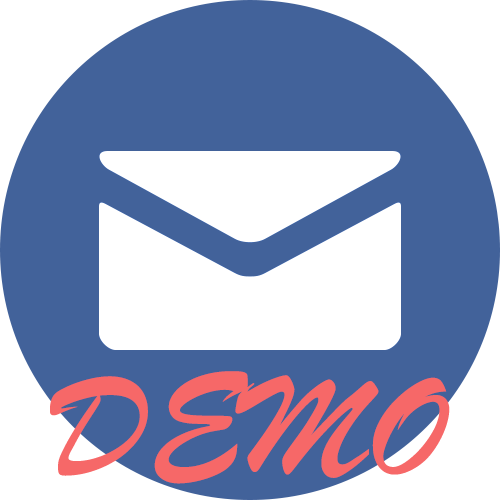
<style>
.page{position:relative;width:500px;height:500px;background:#42629a}
.page>*{position:absolute;margin:0}
.t1{font:150px "BrushScriptMT";color:#f66868}
</style>
<div class="page">
<p class="t1" style="left:50px;top:371px;width:400px;height:113px">DEMO</p>
</div>
